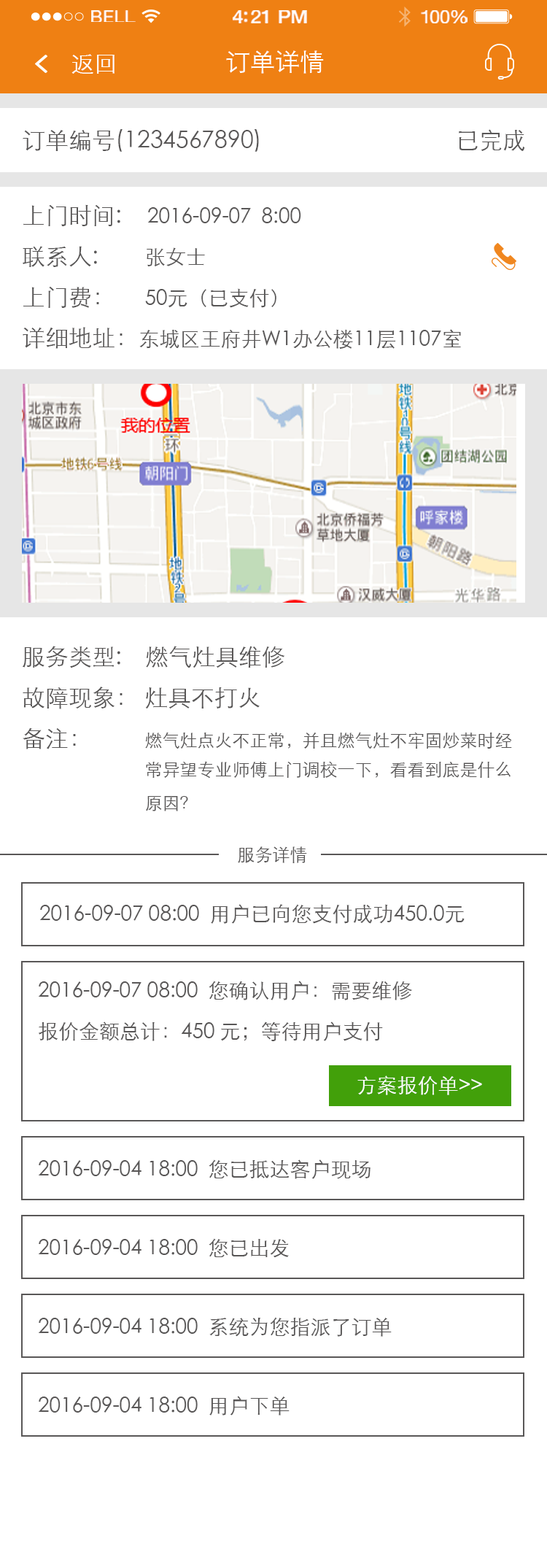
<style>
.page{position:relative;width:547px;height:1568px;background:#ffffff}
.page>*{position:absolute;margin:0}
.t1{font:17px "HelveticaNeue";letter-spacing:0.02em;color:#ffffff;scale:1.06 1}
.t2{font:18.5px "HelveticaNeue-Medium";letter-spacing:-0.02em;color:#ffffff;scale:1.06 1}
.t3{font:17.7px "HelveticaNeue";letter-spacing:-0.02em;color:#ffffff;scale:1.06 1}
.t4{font:23.3px "STXihei";color:#ffffff}
.t5{font:24.8px "STXihei";color:#ffffff}
.t6{font:23.3px "STXihei";color:#595757}
.t7{font:20.4px/40.9px "STXihei";color:#595757}
.t8{font:23.3px/40.9px "STXihei";color:#595757}
.t9{font:20.4px "STXihei";color:#595757}
.t10{font:17.5px/33.6px "STXihei";color:#595757}
.t11{font:23.3px/33.6px "STXihei";color:#595757}
.t12{font:17.5px/40.9px "STXihei";color:#595757}
.t13{font:17.9px "STXihei";color:#595757}
.t14{font:20.4px "STXihei";color:#ffffff}
</style>
<div class="page">
<p class="t1" style="left:91px;top:10px;width:45px;height:12px">BELL</p>
<p class="t2" style="left:233px;top:10px;width:74px;height:13px">4:21 PM</p>
<p class="t3" style="left:421px;top:10px;width:47px;height:13px">100%</p>
<p class="t4" style="left:72px;top:54px;width:43px;height:20px">返回</p>
<p class="t5" style="left:226px;top:50px;width:98px;height:24px">订单详情</p>
<p class="t6" style="left:23px;top:129px;width:236px;height:23px">订单编号(1234567890)</p>
<p class="t6" style="left:459px;top:129px;width:66px;height:22px">已完成</p>
<p class="t7" style="left:23px;top:204px;width:438px;height:145px"><span class="t8">上门时间:<br>联系人:        </span>张女士<br><span class="t8">上门费：     </span>50元（已支付）<br><span class="t8">详细地址：</span>东城区王府井W1办公楼11层1107室</p>
<p class="t9" style="left:147px;top:207px;width:154px;height:16px">2016-09-07  8:00</p>
<p class="t10" style="left:23px;top:646px;width:489px;height:165px"><span class="t8">服务类型:    燃气灶具维修<br>故障现象： 灶具不打火<br></span><span class="t11">备注：         </span>燃气灶点火不正常，并且燃气灶不牢固炒菜时经<br>                            常异望专业师傅上门调校一下，看看到底是什么<br>                            原因<span class="t12">？</span></p>
<p class="t13" style="left:238px;top:846px;width:69px;height:17px">服务详情</p>
<p class="t9" style="left:39px;top:904px;width:426px;height:20px">2016-09-07 08:00  用户已向您支付成功450.0元</p>
<p class="t7" style="left:38px;top:981px;width:374px;height:60px">2016-09-07 08:00  您确认用户：需要维修<br>报价金额总计：450 元；等待用户支付</p>
<p class="t14" style="left:358px;top:1075px;width:124px;height:20px">方案报价单&gt;&gt;</p>
<p class="t9" style="left:38px;top:1159px;width:333px;height:20px">2016-09-04 18:00  您已抵达客户现场</p>
<p class="t9" style="left:38px;top:1238px;width:251px;height:20px">2016-09-04 18:00  您已出发</p>
<p class="t9" style="left:38px;top:1317px;width:354px;height:20px">2016-09-04 18:00  系统为您指派了订单</p>
<p class="t9" style="left:38px;top:1396px;width:252px;height:20px">2016-09-04 18:00  用户下单</p>
</div>
